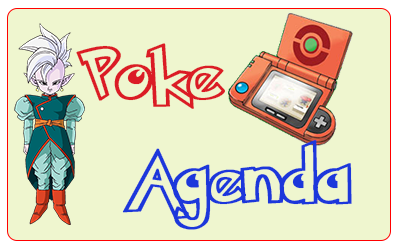
<style>
.page{position:relative;width:400px;height:250px;background:#eff6cf}
.page>*{position:absolute;margin:0}
.t1{font:59.2px "PokemonHollowNormal";color:#db1c25;font-weight:bold;scale:1.08 1}
.t2{font:59.2px "PokemonHollowNormal";color:#1c37db;font-weight:bold;scale:1.08 1}
</style>
<div class="page">
<p class="t1" style="left:76px;top:43px;width:149px;height:66px">Poke</p>
<p class="t2" style="left:122px;top:140px;width:230px;height:90px">Agenda</p>
</div>
